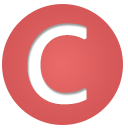
<style>
.page{position:relative;width:128px;height:128px;background:#ffffff}
.page>*{position:absolute;margin:0}
.t1{font:99.7px "MicrosoftYaHei";color:#ffffff;font-weight:bold}
</style>
<div class="page">
<p class="t1" style="left:27px;top:23px;width:60px;height:82px">C</p>
</div>
